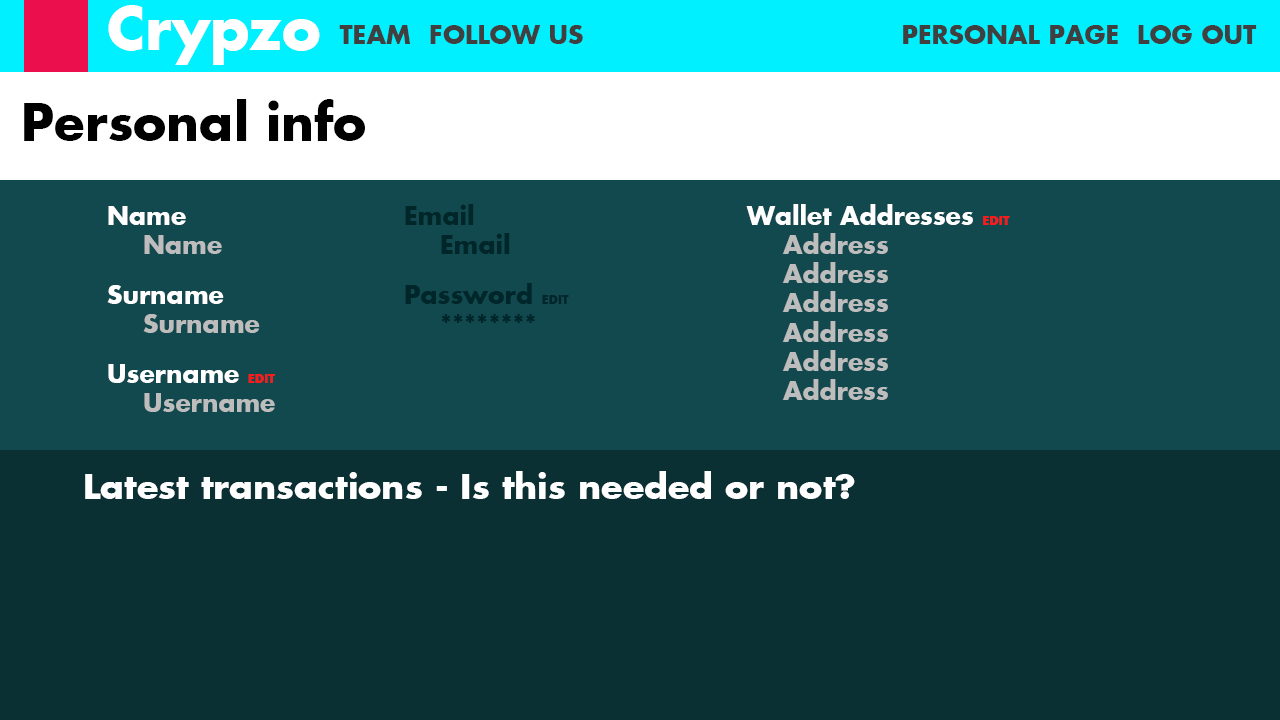
<style>
.page{position:relative;width:1280px;height:720px;background:#0b3033}
.page>*{position:absolute;margin:0}
.t1{font:58.3px "FuturaKoyu";color:#ffffff}
.t2{font:25px "FuturaKoyu";color:#404040}
.t3{font:25.4px "FuturaKoyu";color:#404040}
.t4{font:50px "FuturaKoyu";color:#010000}
.t5{font:25px/29.2px "FuturaKoyu";color:#bdbdbd}
.t6{font:25px/37.5px "FuturaKoyu";color:#ffffff}
.t7{font:25px/29.2px "FuturaKoyu";color:#ffffff}
.t8{font:25px/50px "FuturaKoyu";color:#ffffff}
.t9{font:25px/41.7px "FuturaKoyu";color:#ffffff}
.t10{font:12.5px/37.5px "FuturaKoyu";color:#ff1919}
.t11{font:25px/29.2px "FuturaKoyu";color:#00262a}
.t12{font:25px/37.5px "FuturaKoyu";color:#00262a}
.t13{font:25px/50px "FuturaKoyu";color:#00262a}
.t14{font:12.5px/37.5px "FuturaKoyu";color:#00262a}
.t15{font:33.3px "FuturaKoyu";color:#ffffff;scale:1.05 1}
</style>
<div class="page">
<p class="t1" style="left:108px;top:5px;width:212px;height:60px">Crypzo</p>
<p class="t2" style="left:339px;top:25px;width:72px;height:19px">TEAM</p>
<p class="t3" style="left:430px;top:25px;width:153px;height:19px">FOLLOW US</p>
<p class="t3" style="left:903px;top:25px;width:215px;height:19px">PERSONAL PAGE</p>
<p class="t3" style="left:1138px;top:25px;width:119px;height:19px">LOG OUT</p>
<p class="t4" style="left:24px;top:99px;width:341px;height:42px">Personal info</p>
<p class="t5" style="left:107px;top:206px;width:168px;height:206px"><span class="t6">Nam</span><span class="t7">e<br> </span>Name<br><span class="t8">Sur</span><span class="t9">nam</span><span class="t6">e<br> </span>Surname<br><span class="t8">U</span><span class="t9">sern</span><span class="t9">am</span><span class="t6">e </span><span class="t10">EDIT<br> </span>Username</p>
<p class="t11" style="left:405px;top:204px;width:164px;height:119px"><span class="t12">Email<br></span> Email<br><span class="t13">Pa</span><span class="t12">ssword </span><span class="t14">EDIT<br></span> ********</p>
<p class="t5" style="left:746px;top:204px;width:264px;height:196px"><span class="t6">Wallet Addresses </span><span class="t10">EDIT<br> </span>Address<br> Address<br> Address<br> Address<br> Address<br> Address</p>
<p class="t15" style="left:85px;top:471px;width:770px;height:28px">Latest transactions - Is this needed or not?</p>
</div>
